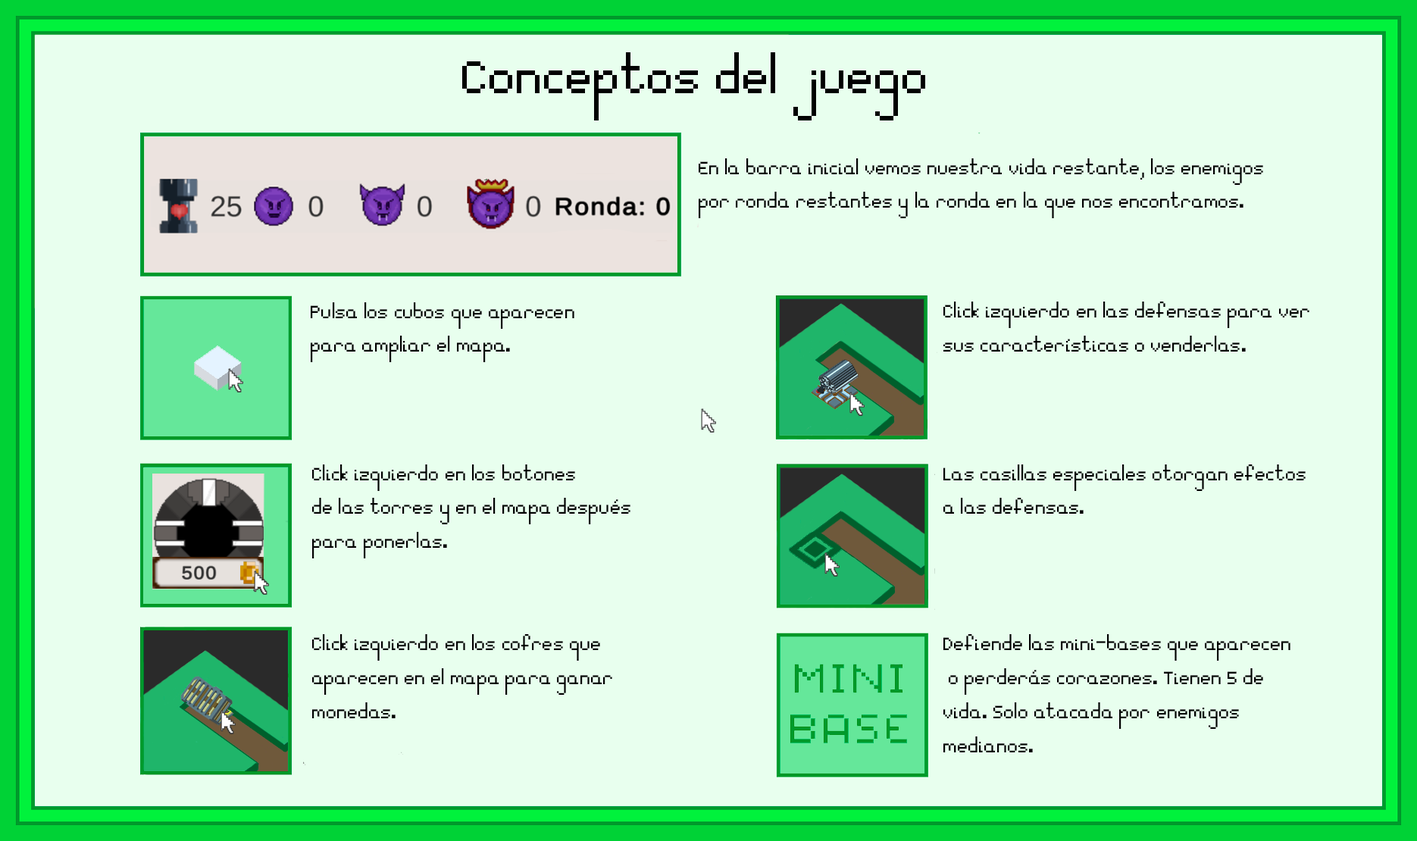
<style>
.page{position:relative;width:1417px;height:841px;background:#e8ffee}
.page>*{position:absolute;margin:0}
.t1{font:28.4px "Essential";color:#000000}
</style>
<div class="page">
<p class="t1" style="left:699px;top:158px;width:564px;height:60px">En la barra inicial vemos nuestra vida restante, los enemigos <br>por ronda restantes y la ronda en la que nos encontramos.</p>
<p class="t1" style="left:311px;top:302px;width:264px;height:60px">Pulsa los cubos que aparecen<br>para ampliar el mapa.</p>
<p class="t1" style="left:944px;top:302px;width:366px;height:50px">Click izquierdo en las defensas para ver<br>sus características o venderlas.</p>
<p class="t1" style="left:312px;top:465px;width:319px;height:94px">Click izquierdo en los botones <br>de las torres y en el mapa después <br>para ponerlas.</p>
<p class="t1" style="left:944px;top:465px;width:362px;height:49px">Las casillas especiales otorgan efectos <br>a las defensas.</p>
<p class="t1" style="left:312px;top:634px;width:300px;height:85px">Click izquierdo en los cofres que <br>aparecen en el mapa para ganar <br>monedas.</p>
<p class="t1" style="left:944px;top:634px;width:347px;height:119px">Defiende las mini-bases que aparecen<br> o perderás corazones. Tienen 5 de<br>vida. Solo atacada por enemigos <br>medianos.</p>
</div>
